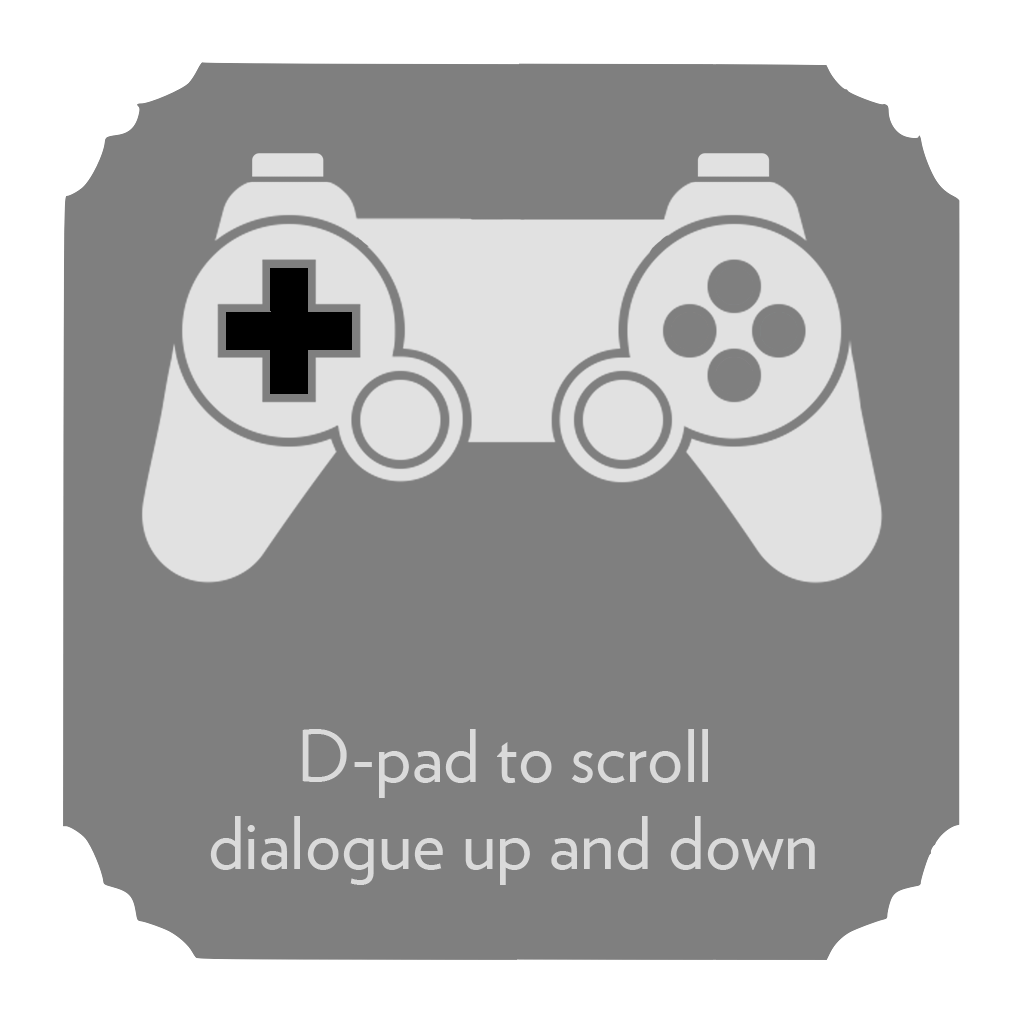
<style>
.page{position:relative;width:1024px;height:1024px;background:#7f7f7f}
.page>*{position:absolute;margin:0}
.t1{font:72px "Verlag-Book";color:#dadada}
</style>
<div class="page">
<p class="t1" style="left:210px;top:729px;width:605px;height:156px;text-align:center">D-pad to scroll <br>dialogue up and down</p>
</div>
